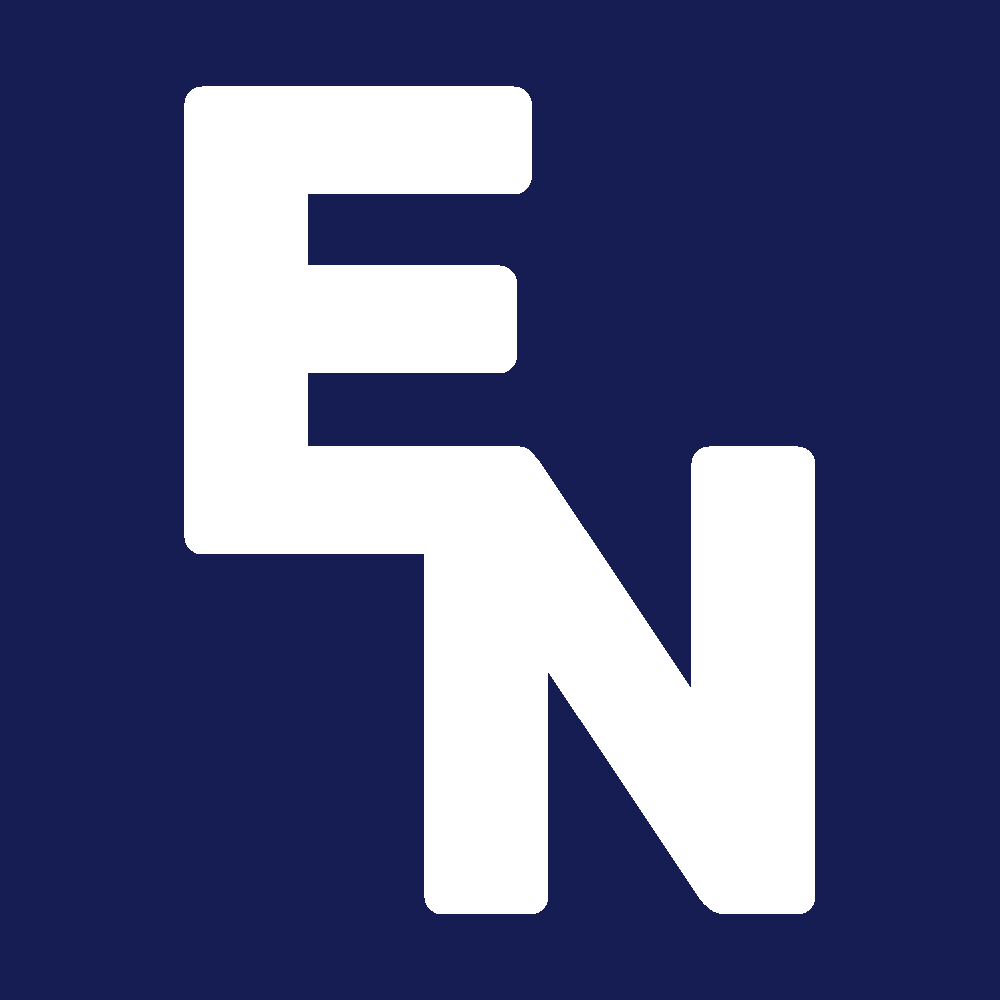
<style>
.page{position:relative;width:1000px;height:1000px;background:#161d53}
.page>*{position:absolute;margin:0}
.t1{font:666.7px "Rubik-Bold";color:#ffffff}
</style>
<div class="page">
<p class="t1" style="left:184px;top:86px;width:353px;height:468px">E</p>
<p class="t1" style="left:424px;top:446px;width:391px;height:468px">N</p>
</div>
